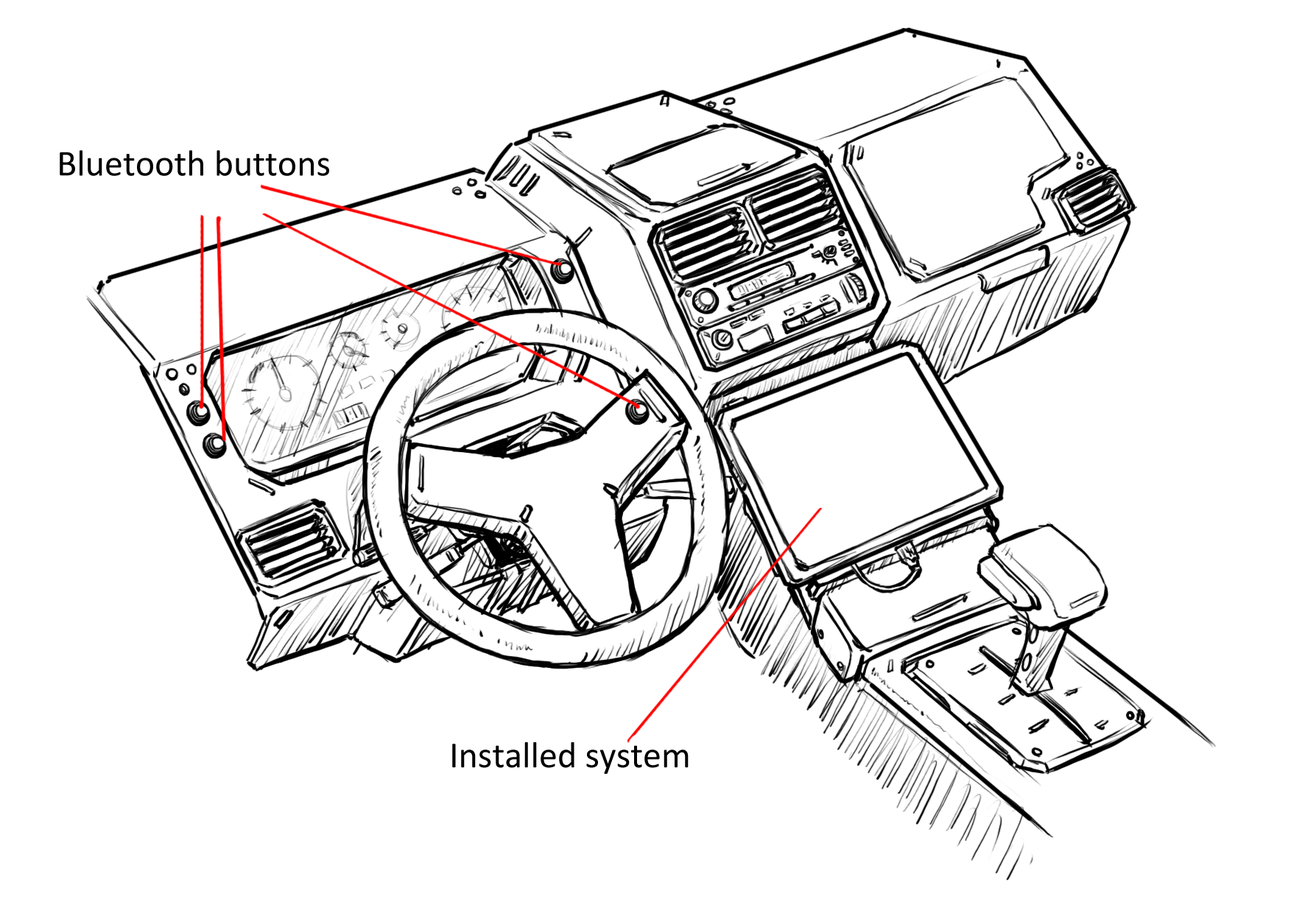
<style>
.page{position:relative;width:1305px;height:913px;background:#ffffff}
.page>*{position:absolute;margin:0}
.t1{font:36.8px "Calibri";color:#000000}
</style>
<div class="page">
<p class="t1" style="left:60px;top:150px;width:269px;height:26px">Bluetooth buttons</p>
<p class="t1" style="left:452px;top:743px;width:237px;height:31px">Installed system</p>
</div>
